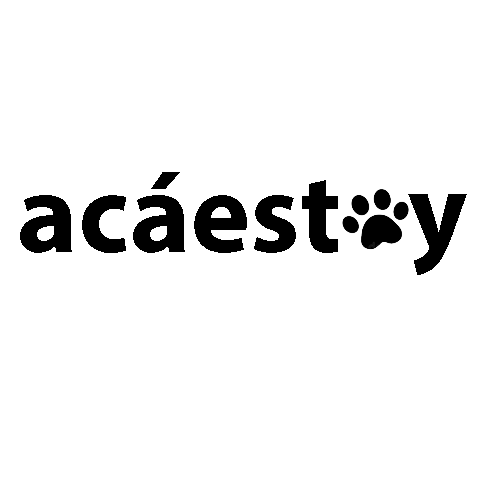
<style>
.page{position:relative;width:500px;height:500px;background:#ffffff}
.page>*{position:absolute;margin:0}
.t1{font:160px "MyriadArabic-Bold";color:#000000}
</style>
<div class="page">
<p class="t1" style="left:20px;top:172px;width:318px;height:81px">acáest</p>
<p class="t1" style="left:408px;top:194px;width:59px;height:81px">y</p>
</div>
